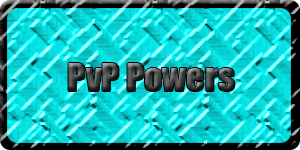
<style>
.page{position:relative;width:300px;height:150px}
.page>*{position:absolute;margin:0}
.t1{font:36px "Impact"}
</style>
<div class="page">
<p class="t1" style="left:68px;top:63px;width:167px;height:28px">PvP Powers</p>
</div>
